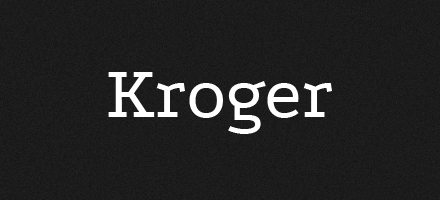
<style>
.page{position:relative;width:440px;height:200px}
.page>*{position:absolute;margin:0}
.t1{font:76px "Podkova";letter-spacing:-0.02em;color:#ffffff}
</style>
<div class="page">
<p class="t1" style="left:108px;top:72px;width:225px;height:62px">Kroger</p>
</div>
